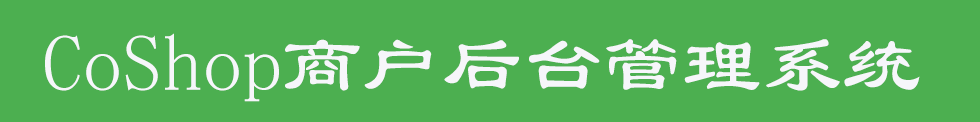
<style>
.page{position:relative;width:980px;height:122px;background:#4caf50}
.page>*{position:absolute;margin:0}
.t1{font:80px "LiSu";color:#f6f6fa}
</style>
<div class="page">
<p class="t1" style="left:45px;top:33px;width:875px;height:69px">CoShop商户后台管理系统</p>
</div>
